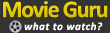
<style>
.page{position:relative;width:110px;height:33px;background:#333333}
.page>*{position:absolute;margin:0}
.t1{font:24px "Calibri-Bold";letter-spacing:-0.05em;color:#e2cb0c}
.t2{font:11px "Calibri-BoldItalic";letter-spacing:0.05em;color:#ffffff}
.t3{font:11px "Calibri-BoldItalic";letter-spacing:0.05em;color:#fe6600}
</style>
<div class="page">
<p class="t1" style="left:3px;top:1px;width:105px;height:17px">Movie Guru</p>
<p class="t2" style="left:24px;top:22px;width:79px;height:9px">what to <span class="t3">watch</span>?</p>
</div>
